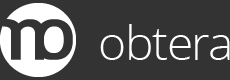
<style>
.page{position:relative;width:230px;height:80px;background:#333333}
.page>*{position:absolute;margin:0}
.t1{font:48px "OpenSans-Light";letter-spacing:-0.025em;color:#ffffff}
</style>
<div class="page">
<p class="t1" style="left:100px;top:24px;width:130px;height:36px">obtera</p>
</div>
